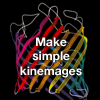
<style>
.page{position:relative;width:100px;height:100px;background:#000000}
.page>*{position:absolute;margin:0}
.t1{font:12px "HelveticaNeue-Bold";color:#ffffff}
</style>
<div class="page">
<p class="t1" style="left:20px;top:37px;width:62px;height:41px;text-align:center">Make<br>simple<br>kinemages</p>
</div>
